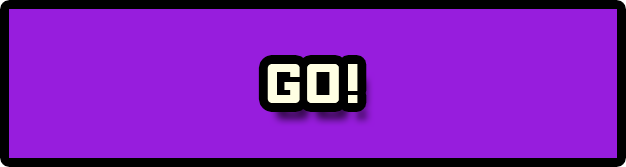
<style>
.page{position:relative;width:626px;height:167px;background:#971ddd}
.page>*{position:absolute;margin:0}
.t1{font:90px "ONRAMP";color:#ffffe3}
</style>
<div class="page">
<p class="t1" style="left:267px;top:64px;width:91px;height:39px">GO!</p>
</div>
